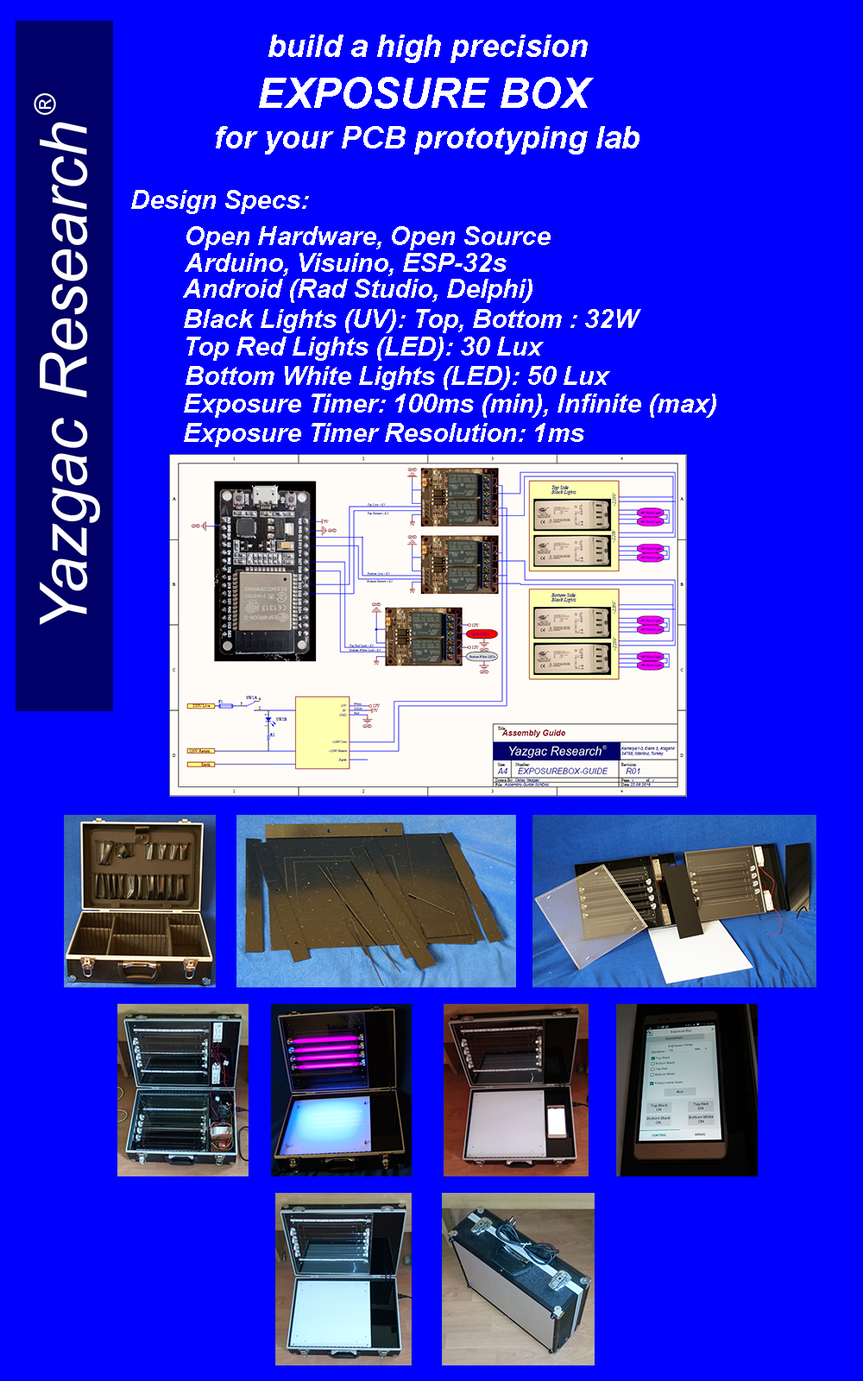
<style>
.page{position:relative;width:863px;height:1381px;background:#0000ff}
.page>*{position:absolute;margin:0}
.t1{font:31.1px "Arial-BoldItalicMT";color:#ffffff}
.t2{font:41.4px "Arial-BoldItalicMT";color:#ffffff}
.t3{font:25.9px "Arial-BoldItalicMT";color:#ffffff}
</style>
<div class="page">
<p class="t1" style="left:268px;top:35px;width:320px;height:28px">build a high precision</p>
<p class="t2" style="left:259px;top:77px;width:335px;height:32px">EXPOSURE BOX</p>
<p class="t1" style="left:216px;top:126px;width:424px;height:29px">for your PCB prototyping lab</p>
<p class="t3" style="left:131px;top:190px;width:178px;height:24px">Design Specs:</p>
<p class="t3" style="left:186px;top:226px;width:365px;height:24px">Open Hardware, Open Source</p>
<p class="t3" style="left:185px;top:253px;width:322px;height:23px">Arduino, Visuino, ESP-32s</p>
<p class="t3" style="left:183px;top:279px;width:350px;height:24px">Android (Rad Studio, Delphi)</p>
<p class="t3" style="left:184px;top:309px;width:457px;height:24px">Black Lights (UV): Top, Bottom : 32W</p>
<p class="t3" style="left:186px;top:337px;width:358px;height:24px">Top Red Lights (LED): 30 Lux</p>
<p class="t3" style="left:186px;top:366px;width:424px;height:24px">Bottom White Lights (LED): 50 Lux</p>
<p class="t3" style="left:184px;top:394px;width:533px;height:24px">Exposure Timer: 100ms (min), Infinite (max)</p>
<p class="t3" style="left:184px;top:423px;width:400px;height:24px">Exposure Timer Resolution: 1ms</p>
</div>
